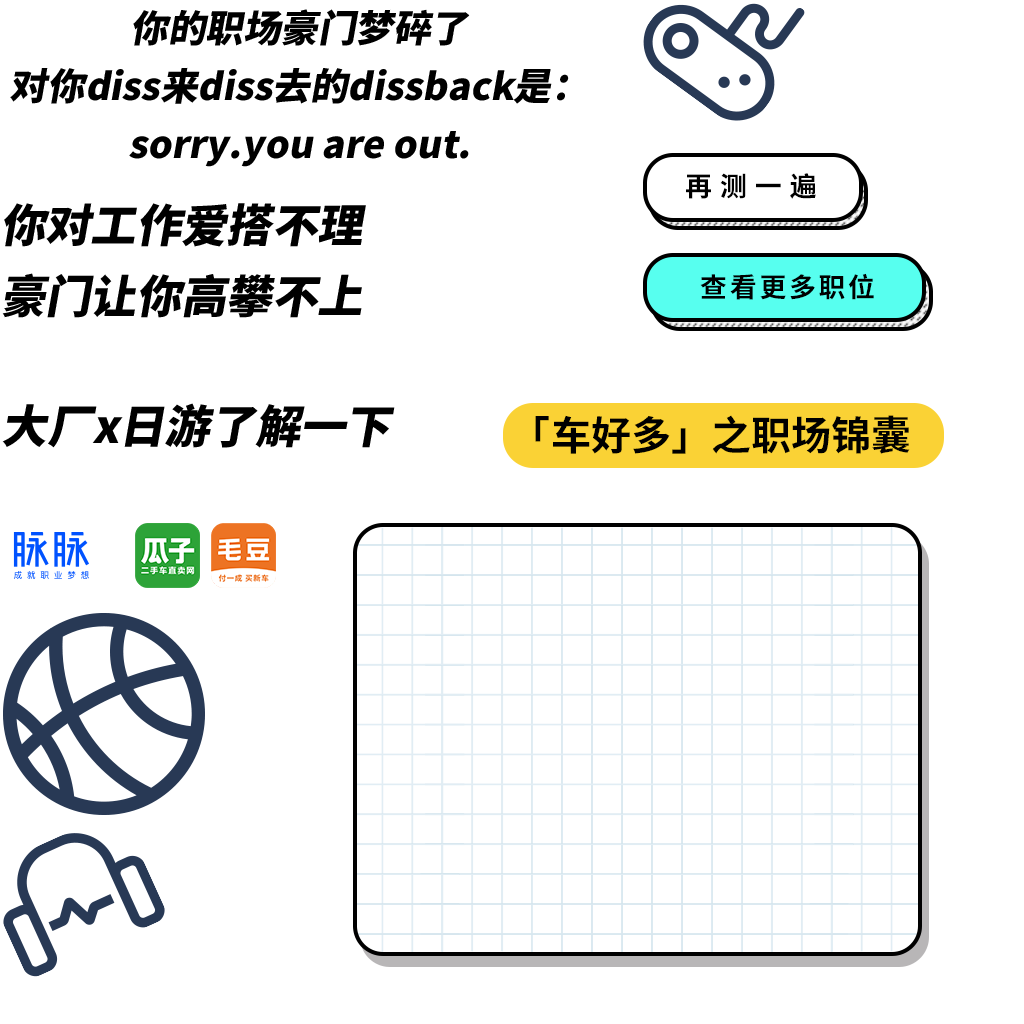
<style>
.page{position:relative;width:1024px;height:1024px;background:#ffffff}
.page>*{position:absolute;margin:0}
.t1{font:37.5px/58.2px "SourceHanSansCN-Heavy";color:#000000;font-style:italic}
.t2{font:26.9px "SourceHanSansCN-Bold";letter-spacing:0.3em;color:#000000}
.t3{font:45.3px/71.2px "SourceHanSansCN-Heavy";color:#000000;font-style:italic}
.t4{font:26.9px "SourceHanSansCN-Bold";letter-spacing:0.1em;color:#000000}
.t5{font:45.3px "SourceHanSansCN-Heavy";color:#000000;font-style:italic}
.t6{font:40px "SourceHanSansCN-Bold";color:#000000}
.t7{font:40px "SourceHanSansCN-Bold";letter-spacing:-0.1em;color:#000000}
</style>
<div class="page">
<p class="t1" style="left:10px;top:9px;width:559px;height:158px;text-align:center">你的职场豪门梦碎了<br>对你diss来diss去的dissback是：<br>sorry.you are out.</p>
<p class="t2" style="left:686px;top:173px;width:130px;height:26px">再测一遍</p>
<p class="t3" style="left:2px;top:203px;width:364px;height:115px;text-align:center">你对工作爱搭不理<br>豪门让你高攀不上</p>
<p class="t4" style="left:700px;top:273px;width:174px;height:27px">查看更多职位</p>
<p class="t5" style="left:2px;top:403px;width:393px;height:45px">大厂x日游了解一下</p>
<p class="t6" style="left:535px;top:415px;width:375px;height:39px"><span class="t7">「 </span>车好多」之职场锦囊</p>
</div>
